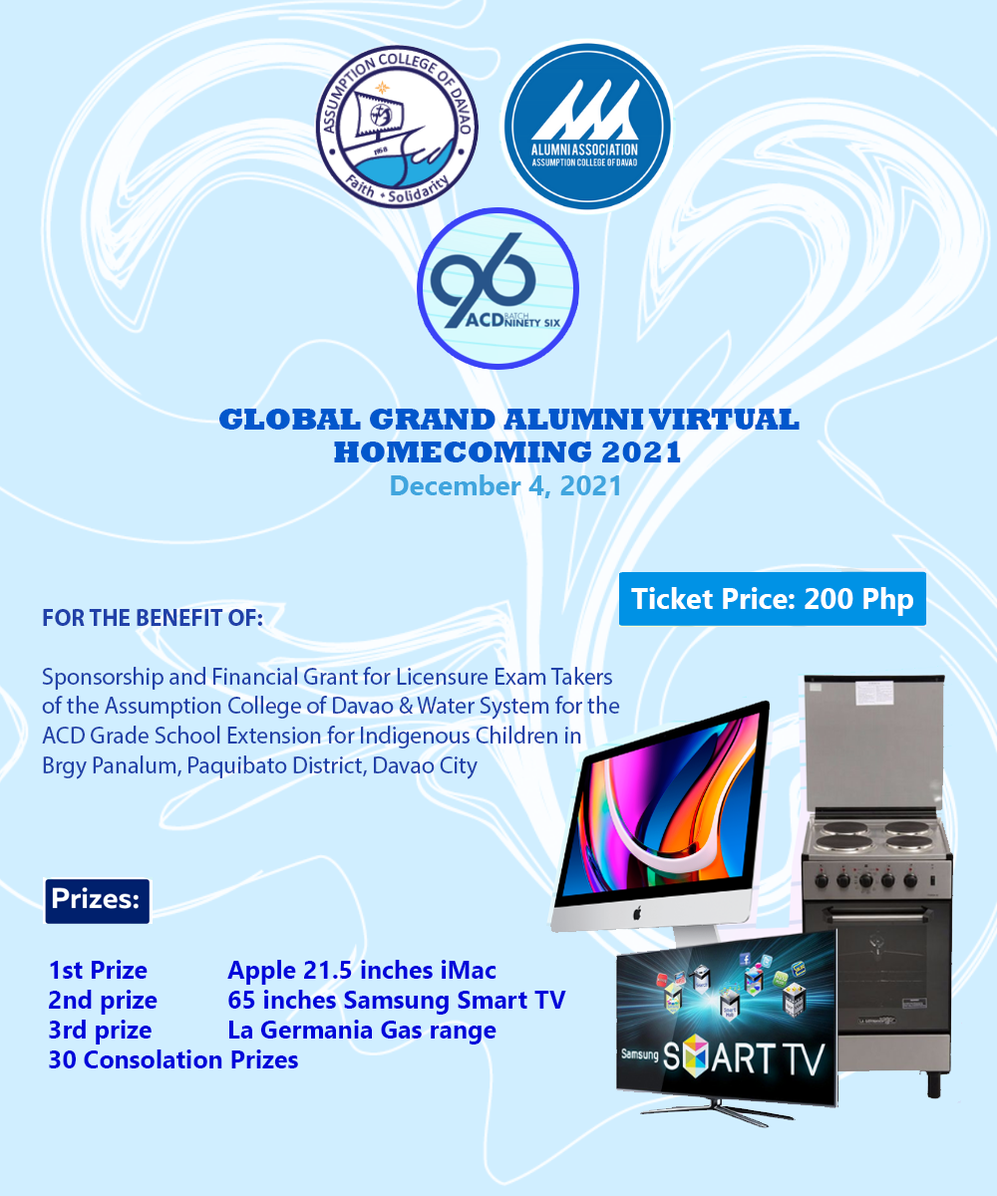
<style>
.page{position:relative;width:997px;height:1196px;background:#d0eeff}
.page>*{position:absolute;margin:0}
.t1{font:30.5px/33.2px "Rockwell-ExtraBold";color:#0257cc}
.t2{font:27.7px/33.2px "NirmalaUI-Bold";color:#40a5de}
.t3{font:28.9px "MyanmarText-Bold";color:#ffffff}
.t4{font:24.6px "MyriadPro-Regular";color:#2141a8;scale:0.96 1}
.t5{font:24.6px "MyriadPro-Bold";color:#2141a8;scale:0.96 1}
.t6{font:24.9px "NirmalaUI-Bold";color:#0106da}
</style>
<div class="page">
<p class="t1" style="left:219px;top:409px;width:580px;height:89px;text-align:center">GLOBAL GRAND ALUMNI VIRTUAL<br>HOMECOMING 2021<br><span class="t2">December 4, 2021</span></p>
<p class="t3" style="left:631px;top:587px;width:282px;height:29px">Ticket Price: 200 Php</p>
<p class="t4" style="left:42px;top:609px;width:578px;height:171px"><span class="t5">FOR THE BENEFIT OF: <br><br></span>Sponsorship and Financial Grant for Licensure Exam Takers<br>of the Assumption College of Davao &amp; Water System for the<br>ACD Grade School Extension for Indigenous Children in<br>Brgy Panalum, Paquibato District, Davao City</p>
<p class="t6" style="left:49px;top:960px;width:517px;height:109px">1st Prize   Apple 21.5 inches iMac<br>2nd prize  65 inches Samsung Smart TV<br>3rd prize   La Germania Gas range<br>30 Consolation Prizes</p>
</div>
